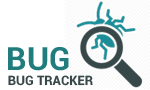
<style>
.page{position:relative;width:150px;height:90px;background:#ffffff}
.page>*{position:absolute;margin:0}
.t1{font:32px "Roboto-Bold";color:#217d7d}
.t2{font:13px "Roboto-Bold";color:#384849}
</style>
<div class="page">
<p class="t1" style="left:8px;top:47px;width:61px;height:24px">BUG</p>
<p class="t2" style="left:8px;top:75px;width:85px;height:11px">BUG TRACKER</p>
</div>
